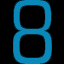
<style>
.page{position:relative;width:64px;height:64px;background:#000000}
.page>*{position:absolute;margin:0}
.t1{font:88px "MKSansTallX";color:#0a88ba}
</style>
<div class="page">
<p class="t1" style="left:13px;top:0px;width:39px;height:64px">8</p>
</div>
